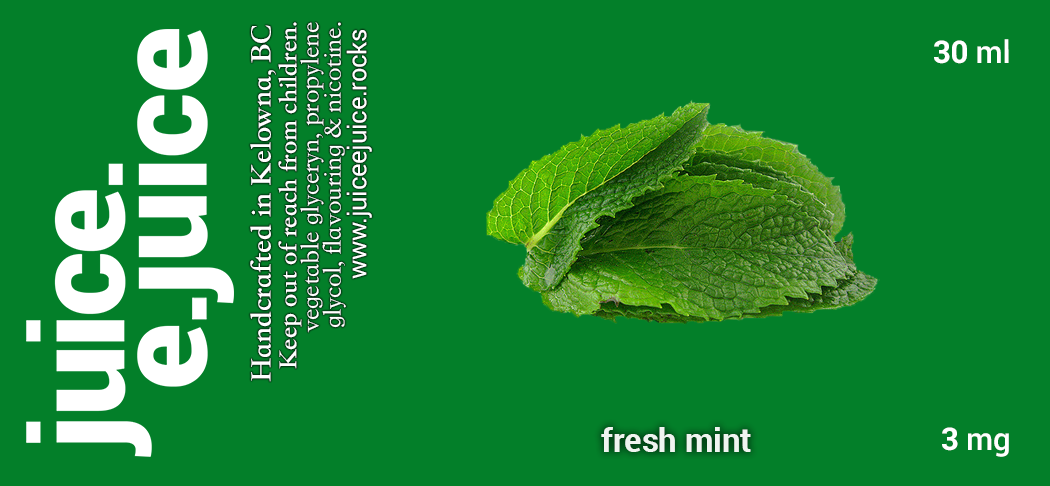
<style>
.page{position:relative;width:1050px;height:486px;background:#037f29}
.page>*{position:absolute;margin:0}
.t1{font:30.6px "STSongti-TC-Bold";letter-spacing:-0.01em;color:#ffffff}
.t2{font:26.6px/22.1px "STSongti-TC-Regular";letter-spacing:-0.01em;color:#ffffff}
.t3{font:26.6px/22.1px "STSongti-TC-Bold";letter-spacing:-0.01em;color:#ffffff}
.t4{font:25.6px "Roboto-Regular";letter-spacing:-0.01em;color:#ffffff}
.t5{font:31.2px "Roboto-Bold";letter-spacing:-0.01em;color:#ffffff}
.t6{font:31.2px "Roboto-Medium";letter-spacing:-0.01em;color:#ffffff}
.t7{font:33.2px "Roboto-Bold";letter-spacing:-0.01em;color:#ffffff}
</style>
<div class="page">
<p class="t1" style="left:250px;top:25px;width:26px;height:357px;rotate:-90deg">Handcrafted in Kelowna, BC</p>
<p class="t2" style="left:278px;top:22px;width:68px;height:347px;text-align:right;rotate:-90deg"><span class="t3">Keep out of reach from children.<br></span>vegetable glyceryn, propylene<br>glycol, flavouring &amp; nicotine.</p>
<p class="t4" style="left:346px;top:30px;width:26px;height:249px;rotate:-90deg">www.juiceejuice.rocks</p>
<p class="t5" style="left:934px;top:39px;width:75px;height:25px">30 <span class="t6">ml</span></p>
<p class="t7" style="left:601px;top:427px;width:150px;height:25px;opacity:0.9">fresh mint</p>
<p class="t6" style="left:942px;top:427px;width:67px;height:30px"><span class="t5">3 </span>mg</p>
</div>
